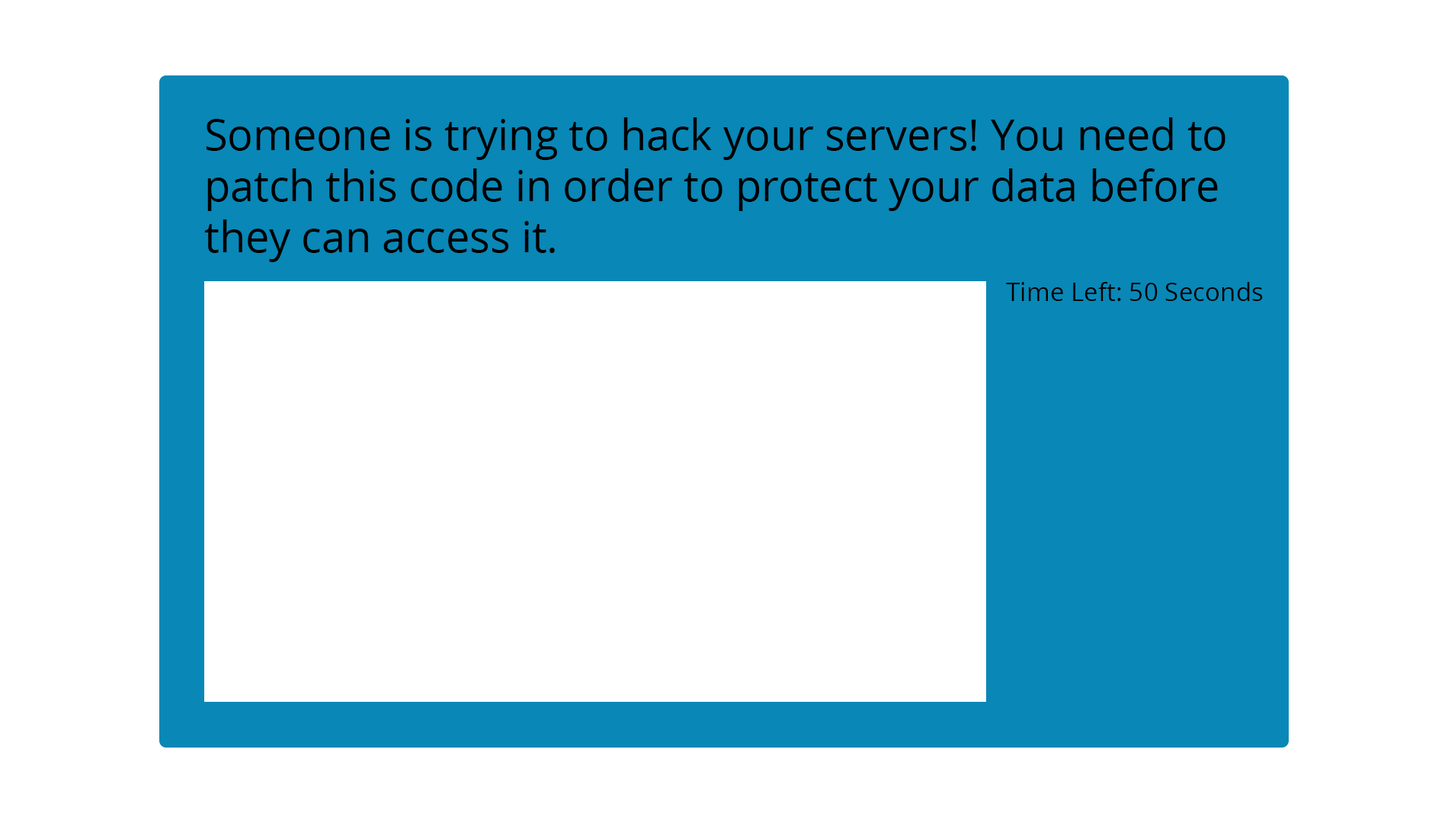
<style>
.page{position:relative;width:1448px;height:823px;background:#ffffff}
.page>*{position:absolute;margin:0}
.t1{font:42.4px "OpenSans";color:#000000}
.t2{font:25.4px "OpenSans";color:#000000}
</style>
<div class="page">
<p class="t1" style="left:204px;top:117px;width:1022px;height:145px">Someone is trying to hack your servers! You need to patch this code in order to protect your data before they can access it.</p>
<p class="t2" style="left:1006px;top:282px;width:257px;height:19px">Time Left: 50 Seconds</p>
</div>
